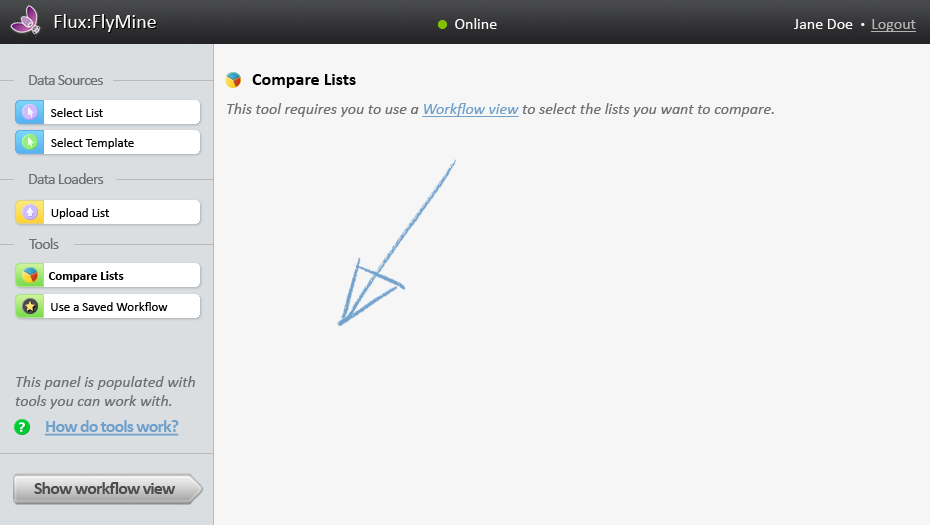
<style>
.page{position:relative;width:930px;height:525px;background:#f6f6f6}
.page>*{position:absolute;margin:0}
.t1{font:20px "Calibri";color:#f9f9f9}
.t2{font:16px "Calibri";color:#fafafa}
.t3{font:30px "Calibri";color:#81c000}
.t4{font:10px "Calibri";color:#fafafa}
.t5{font:16px "Calibri";color:#b3b3b3;text-decoration:underline}
.t6{font:16px "Calibri";letter-spacing:-0.05em;color:#6f7074}
.t7{font:18px "Calibri-Bold";color:#000000}
.t8{font:13px "Calibri";color:#000000}
.t9{font:16px "Calibri-Italic";color:#6f7074}
.t10{font:16px "Calibri-Italic";color:#6fa0cb;text-decoration:underline}
.t11{font:13px "Calibri-Bold";color:#000000}
.t12{font:18px "Calibri-Bold";letter-spacing:-0.05em;color:#6fa0cb;text-decoration:underline}
.t13{font:18px "Calibri-Bold";letter-spacing:-0.05em;color:#4e4e4f}
</style>
<div class="page">
<p class="t1" style="left:54px;top:14px;width:102px;height:18px">Flux:FlyMine</p>
<p class="t2" style="left:437px;top:18px;width:60px;height:11px"><span class="t3">•  </span>Online</p>
<p class="t2" style="left:794px;top:19px;width:122px;height:13px">Jane Doe  <span class="t4">•  </span><span class="t5">Logout</span></p>
<p class="t6" style="left:29px;top:75px;width:74px;height:10px">Data Sources</p>
<p class="t7" style="left:252px;top:74px;width:104px;height:14px">Compare Lists</p>
<p class="t8" style="left:51px;top:108px;width:52px;height:9px">Select List</p>
<p class="t9" style="left:227px;top:103px;width:547px;height:14px">This tool requires you to use a <span class="t10">Workflow view</span> to select the lists you want to compare.</p>
<p class="t8" style="left:51px;top:138px;width:83px;height:11px">Select Template</p>
<p class="t6" style="left:29px;top:173px;width:75px;height:11px">Data Loaders</p>
<p class="t8" style="left:51px;top:208px;width:59px;height:11px">Upload List</p>
<p class="t6" style="left:29px;top:238px;width:30px;height:11px">Tools</p>
<p class="t11" style="left:48px;top:271px;width:76px;height:11px">Compare Lists</p>
<p class="t8" style="left:51px;top:302px;width:117px;height:9px">Use a Saved Workflow</p>
<p class="t9" style="left:15px;top:376px;width:180px;height:33px">This panel is populated with<br>tools you can work with.</p>
<p class="t12" style="left:45px;top:420px;width:134px;height:16px">How do tools work?</p>
<p class="t13" style="left:34px;top:482px;width:142px;height:12px">Show workflow view</p>
</div>
